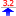
<style>
.page{position:relative;width:16px;height:16px;background:#ffffff}
.page>*{position:absolute;margin:0}
.t1{font:8px "Verdana";letter-spacing:-0.1em}
</style>
<div class="page">
<p class="t1" style="left:3px;top:0px;width:11px;height:7px">3.2</p>
</div>
